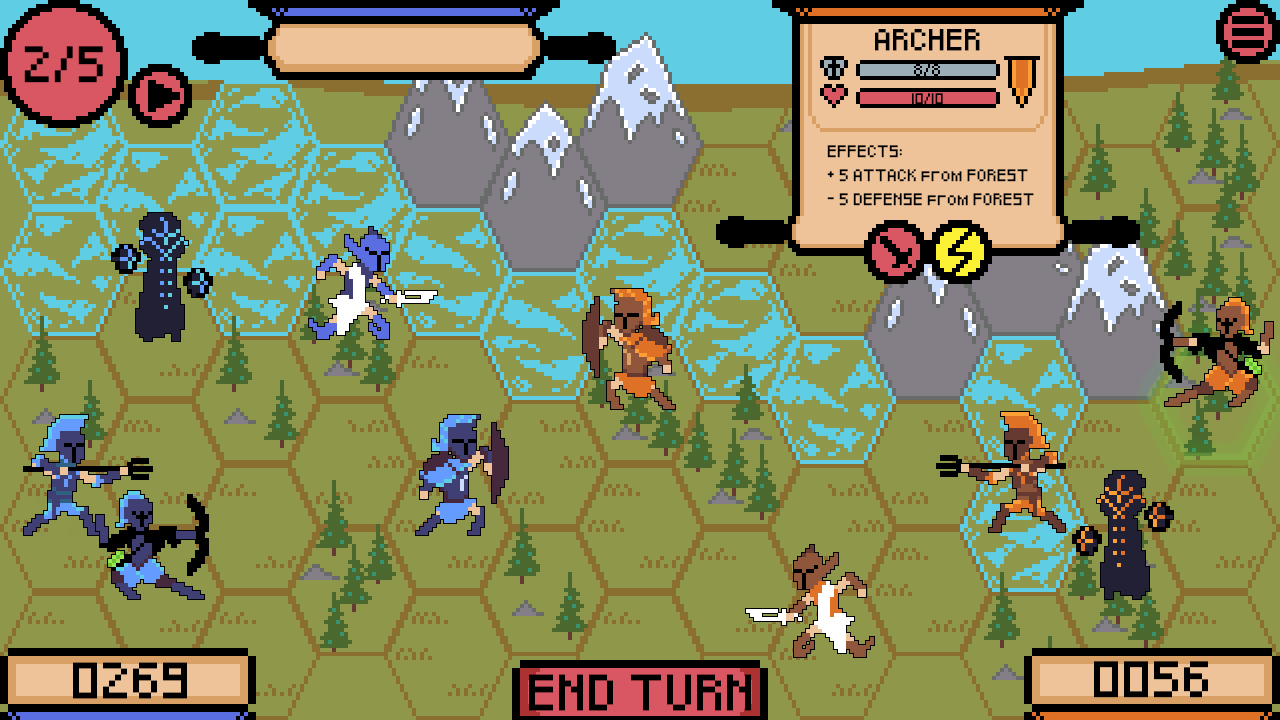
<style>
.page{position:relative;width:1280px;height:720px;background:#8f974a}
.page>*{position:absolute;margin:0}
.t1{font:18px "Pixeled";color:#000000}
.t2{font:30px "Pixeled";color:#000000}
.t3{font:10px "Pixeled";color:#000000}
.t4{font:9px "Pixeled";color:#000000}
</style>
<div class="page">
<p class="t1" style="left:875px;top:29px;width:105px;height:22px">ARCHER</p>
<p class="t2" style="left:24px;top:46px;width:79px;height:37px">2/5</p>
<p class="t3" style="left:914px;top:64px;width:26px;height:12px">8/8</p>
<p class="t4" style="left:912px;top:93px;width:31px;height:11px">10/10</p>
<p class="t3" style="left:827px;top:145px;width:207px;height:61px">EFFECTS:<br><br>+ 5 ATTACK from FOREST<br><br>- 5 DEFENSE from FOREST</p>
<p class="t2" style="left:73px;top:662px;width:114px;height:37px">0269</p>
<p class="t2" style="left:1094px;top:661px;width:114px;height:37px">0056</p>
<p class="t2" style="left:529px;top:674px;width:222px;height:37px">END TURN</p>
</div>
